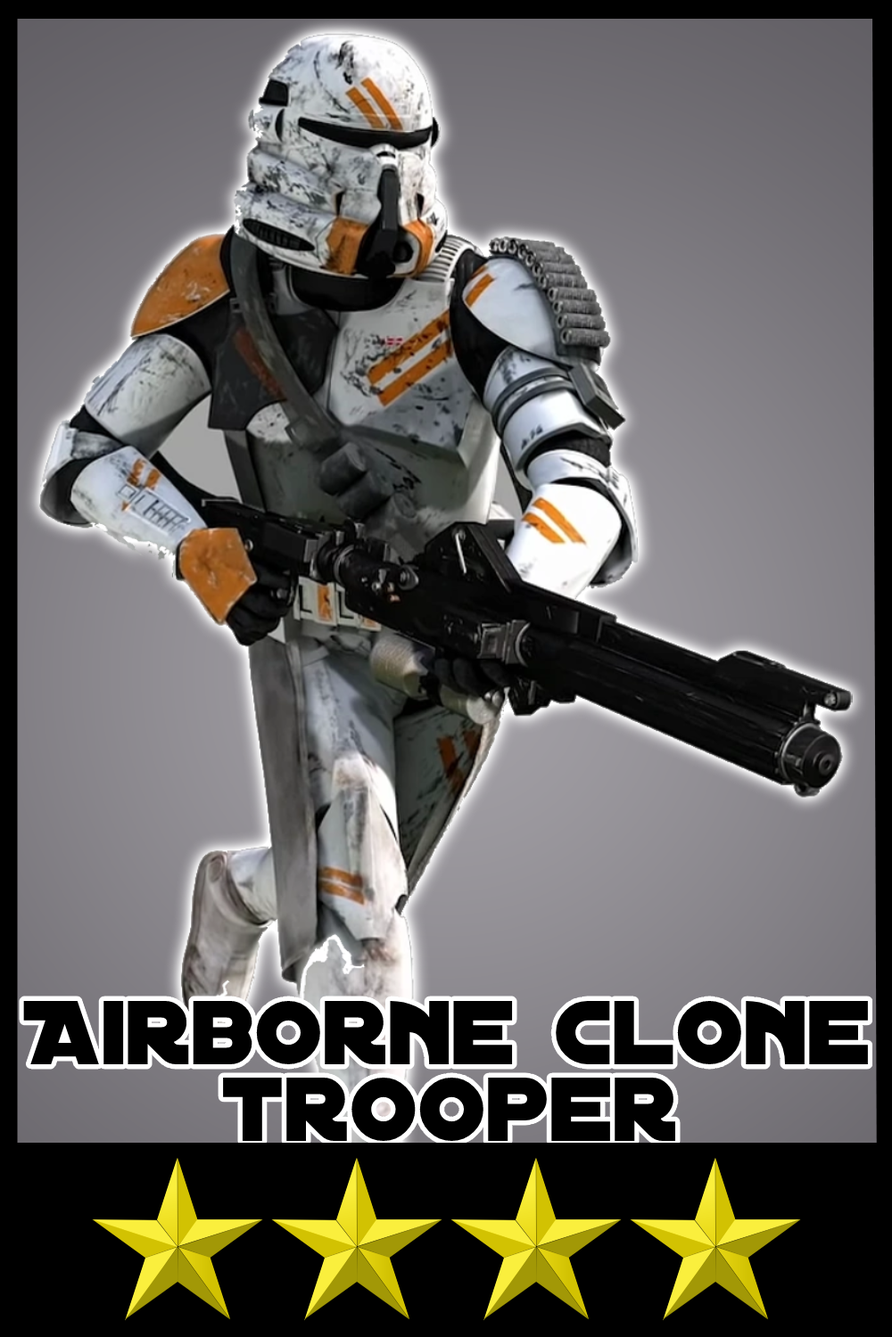
<style>
.page{position:relative;width:892px;height:1337px}
.page>*{position:absolute;margin:0}
.t1{font:97.4px/76.7px "DistantGalaxy";color:#000000}
</style>
<div class="page">
<p class="t1" style="left:23px;top:1000px;width:845px;height:141px;text-align:center">Airborne clone<br>trooper</p>
</div>
